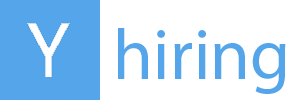
<style>
.page{position:relative;width:300px;height:100px;background:#ffffff}
.page>*{position:absolute;margin:0}
.t1{font:72px "MyriadHebrew-Regular";color:#54a5ea}
</style>
<div class="page">
<p class="t1" style="left:118px;top:28px;width:168px;height:66px">hiring</p>
</div>
